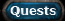
<style>
.page{position:relative;width:65px;height:21px}
.page>*{position:absolute;margin:0}
.t1{font:13.9px "BritannicBold";color:#ffffff;scale:1.12 1}
</style>
<div class="page">
<p class="t1" style="left:10px;top:6px;width:47px;height:11px;opacity:0.65">Quests</p>
</div>
